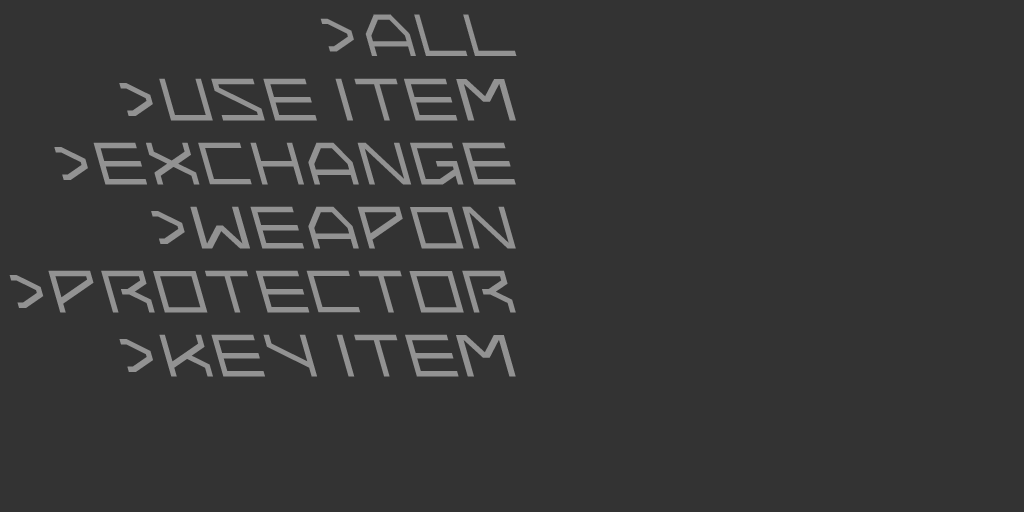
<style>
.page{position:relative;width:1024px;height:512px;background:#333333}
.page>*{position:absolute;margin:0}
.t1{font:49.2px "7THDR2020ThinRegular";letter-spacing:0.21em;color:#929292;scale:0.96 1}
.t2{font:49.2px "7THDR2020ThinRegular";letter-spacing:0.09em;color:#929292;scale:0.96 1}
.t3{font:49.2px "7THDR2020ThinRegular";letter-spacing:0.04em;color:#929292;scale:0.96 1}
.t4{font:49.2px "7THDR2020ThinRegular";letter-spacing:0.02em;color:#929292;scale:0.96 1}
.t5{font:49.2px "7THDR2020ThinRegular";letter-spacing:0.105em;color:#929292;scale:0.96 1}
.t6{font:49.2px "7THDR2020ThinRegular";letter-spacing:0.205em;color:#929292;scale:0.96 1}
.t7{font:49.2px "7THDR2020ThinRegular";letter-spacing:-0.03em;color:#929292;scale:0.96 1}
.t8{font:49.2px "7THDR2020ThinRegular";letter-spacing:0.05em;color:#929292;scale:0.96 1}
.t9{font:49.2px "7THDR2020ThinRegular";letter-spacing:0.11em;color:#929292;scale:0.96 1}
.t10{font:49.2px "7THDR2020ThinRegular";letter-spacing:0.11em;color:#929292;scale:1.11 1}
.t11{font:49.2px "7THDR2020ThinRegular";letter-spacing:0.19em;color:#929292;scale:0.96 1}
.t12{font:49.2px "7THDR2020ThinRegular";letter-spacing:0.08em;color:#929292;scale:0.96 1}
.t13{font:49.2px "7THDR2020ThinRegular";letter-spacing:0.18em;color:#929292;scale:0.96 1}
.t14{font:49.2px "7THDR2020ThinRegular";letter-spacing:0.12em;color:#929292;scale:0.96 1}
.t15{font:49.2px "7THDR2020ThinRegular";letter-spacing:0.1em;color:#929292;scale:0.96 1}
.t16{font:49.2px "7THDR2020ThinRegular";letter-spacing:0.08em;color:#929292}
.t17{font:49.2px "7THDR2020ThinRegular";letter-spacing:0.1em;color:#929292}
.t18{font:49.2px "7THDR2020ThinRegular";letter-spacing:-0.02em;color:#929292;scale:0.96 1}
.t19{font:49.2px "7THDR2020ThinRegular";letter-spacing:0.08em;color:#929292;scale:1.11 1}
</style>
<div class="page">
<p class="t1" style="left:320px;top:14px;width:197px;height:42px">&gt;<span class="t2">A</span><span class="t3">L</span><span class="t4">L</span></p>
<p class="t5" style="left:119px;top:78px;width:397px;height:43px"><span class="t6">&gt;</span>US<span class="t7">E </span><span class="t8">IT</span><span class="t9">E</span><span class="t10">M</span></p>
<p class="t9" style="left:54px;top:142px;width:462px;height:43px"><span class="t11">&gt;</span>EXCHANGE</p>
<p class="t9" style="left:151px;top:206px;width:365px;height:43px"><span class="t11">&gt;</span><span class="t10">W</span>EAPON</p>
<p class="t12" style="left:9px;top:270px;width:507px;height:43px"><span class="t13">&gt;</span><span class="t14">P</span><span class="t15">R</span><span class="t16">O</span>TE<span class="t15">C</span>T<span class="t17">O</span><span class="t15">R</span></p>
<p class="t5" style="left:119px;top:334px;width:397px;height:43px"><span class="t6">&gt;</span>KE<span class="t18">Y </span><span class="t4">I</span><span class="t12">TE</span><span class="t19">M</span></p>
</div>
